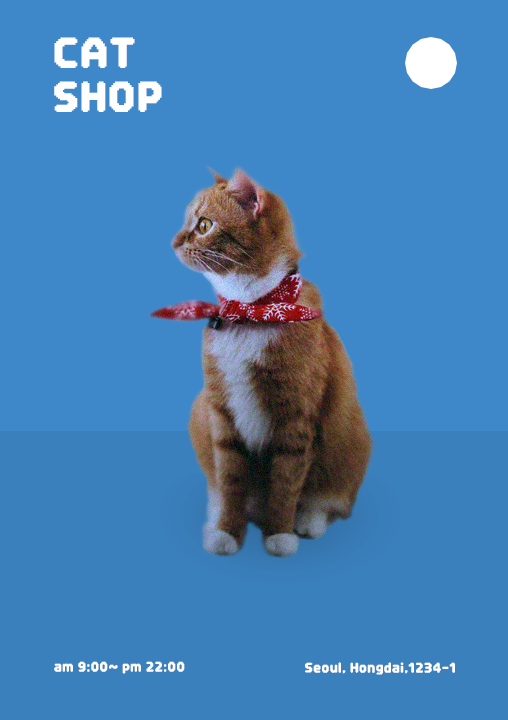
<style>
.page{position:relative;width:508px;height:720px;background:#3e88c9}
.page>*{position:absolute;margin:0}
.t1{font:34px/44.2px "DNFBitBitv2";letter-spacing:0.05em;color:#fefefe}
.t2{font:11px "DNFBitBitv2";letter-spacing:0.05em;color:#ffffff}
</style>
<div class="page">
<p class="t1" style="left:54px;top:37px;width:108px;height:75px">CAT<br>SHOP</p>
<p class="t2" style="left:54px;top:661px;width:131px;height:13px">am 9:00~ pm 22:00</p>
<p class="t2" style="left:305px;top:662px;width:150px;height:13px">Seoul, Hongdai,1234-1</p>
</div>
